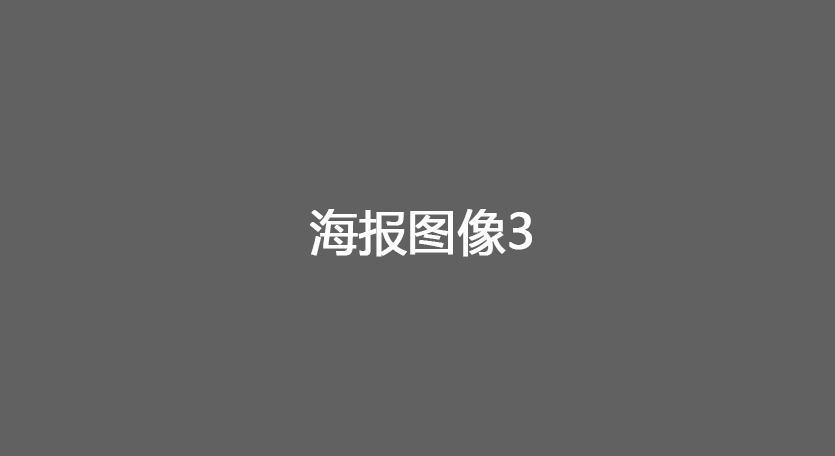
<style>
.page{position:relative;width:835px;height:456px;background:#626161}
.page>*{position:absolute;margin:0}
.t1{font:48px "MicrosoftYaHei";color:#ffffff;font-weight:bold}
</style>
<div class="page">
<p class="t1" style="left:309px;top:209px;width:223px;height:48px">海报图像3</p>
</div>
